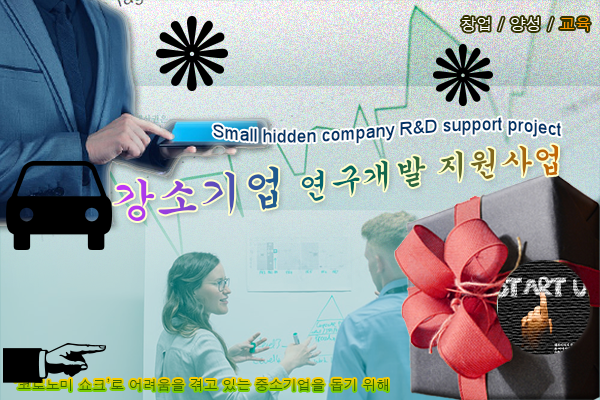
<style>
.page{position:relative;width:600px;height:400px}
.page>*{position:absolute;margin:0}
.t1{font:16px "Dotum";color:#ffffff}
.t2{font:16px "Dotum";color:#ff9900}
.t3{font:18px "ArialMT";color:#003366}
.t4{font:32px "Gungsuh"}
.t5{font:44px "Gungsuh"}
.t6{font:14px "Dotum";color:#336600}
</style>
<div class="page">
<p class="t1" style="left:461px;top:17px;width:129px;height:15px">창업 / 양성 / <span class="t2">교육</span></p>
<p class="t3" style="left:213px;top:117px;width:348px;height:27px">Small hidden company R&amp;D support project</p>
<p class="t4" style="left:113px;top:144px;width:446px;height:78px"><span class="t5">강소기업</span> 연구개발 지원사업</p>
<p class="t6" style="left:14px;top:378px;width:375px;height:14px">‘코로노미 쇼크’로 어려움을 겪고 있는 중소기업을 돕기 위해</p>
</div>
